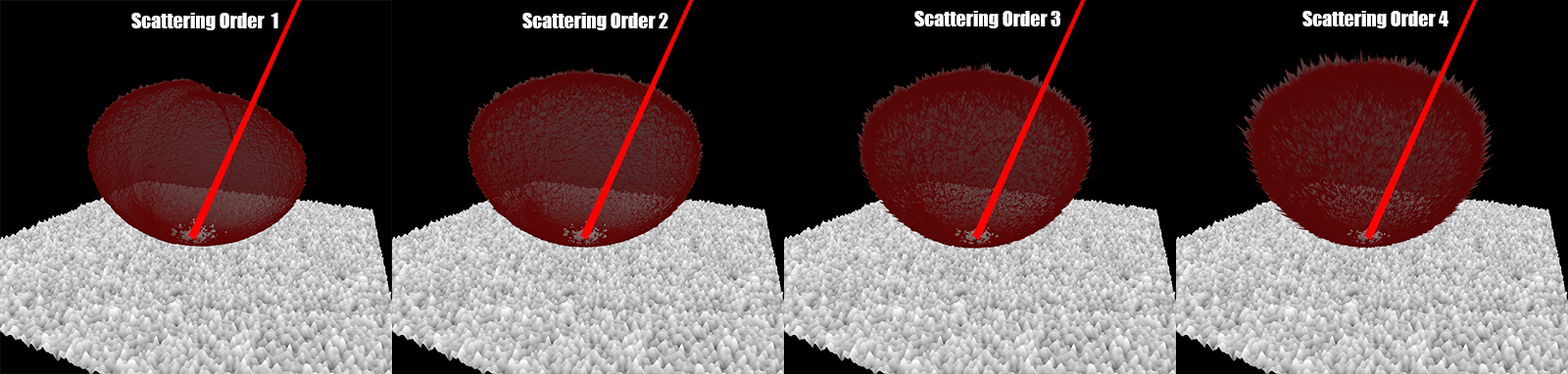
<style>
.page{position:relative;width:1568px;height:374px;background:#000000}
.page>*{position:absolute;margin:0}
.t1{font:19.6px "Impact";color:#ffffff}
</style>
<div class="page">
<p class="t1" style="left:131px;top:13px;width:147px;height:17px">Scattering Order  1</p>
<p class="t1" style="left:522px;top:13px;width:146px;height:17px">Scattering Order 2</p>
<p class="t1" style="left:914px;top:11px;width:146px;height:17px">Scattering Order 3</p>
<p class="t1" style="left:1302px;top:11px;width:146px;height:17px">Scattering Order 4</p>
</div>
